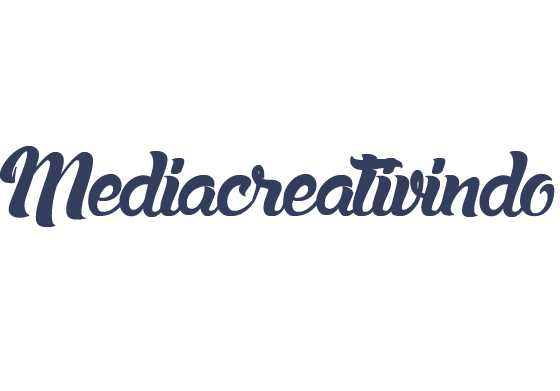
<style>
.page{position:relative;width:560px;height:391px;background:#ffffff}
.page>*{position:absolute;margin:0}
.t1{font:137.9px "laChatteMaman";color:#333e5c}
</style>
<div class="page">
<p class="t1" style="left:0px;top:146px;width:555px;height:81px">Mediacreativindo</p>
</div>
